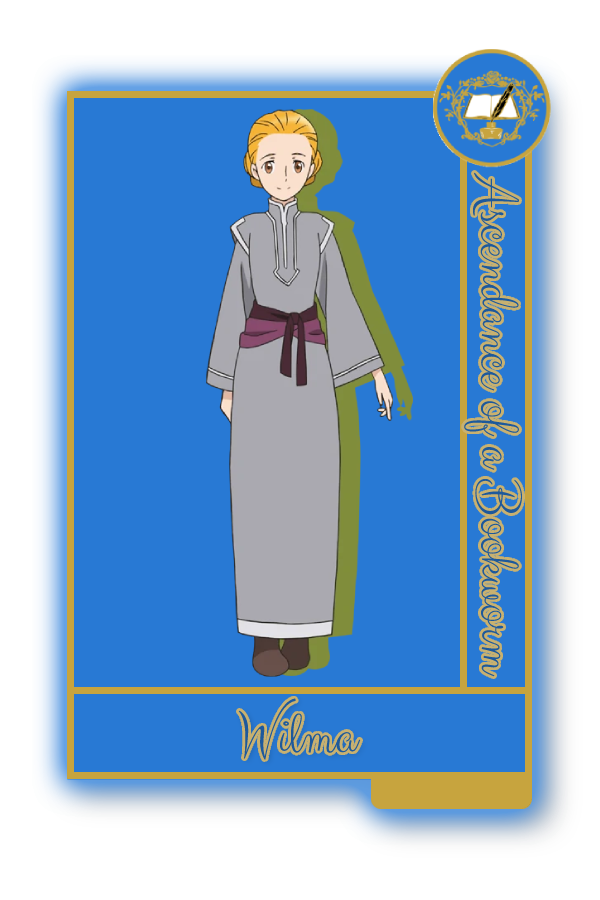
<style>
.page{position:relative;width:600px;height:900px;background:#2879d4}
.page>*{position:absolute;margin:0}
.t1{font:58px "ClickerScript-Regular";color:#1d599c}
.t2{font:60px "ClickerScript-Regular";color:#1d599c}
</style>
<div class="page">
<p class="t1" style="left:464px;top:172px;width:59px;height:505px;rotate:90deg">Ascendance of a Bookworm</p>
<p class="t2" style="left:238px;top:698px;width:123px;height:62px">Wilma</p>
</div>
